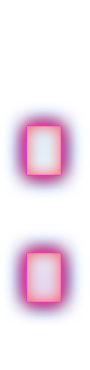
<style>
.page{position:relative;width:90px;height:370px;background:#ffffff}
.page>*{position:absolute;margin:0}
.t1{font:396px "RavePartyBold";letter-spacing:0.025em;scale:0.76 1}
</style>
<div class="page">
<p class="t1" style="left:27px;top:126px;width:34px;height:176px">:</p>
<p class="t1" style="left:27px;top:126px;width:34px;height:176px">:</p>
</div>
